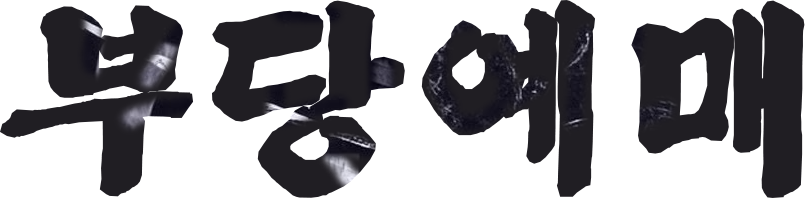
<style>
.page{position:relative;width:805px;height:198px;background:#ffffff}
.page>*{position:absolute;margin:0}
.t1{font:200px "Yj-BACDOO-Bold";color:#201e23;font-weight:bold}
</style>
<div class="page">
<p class="t1" style="left:0px;top:0px;width:805px;height:198px">부당예매</p>
</div>
